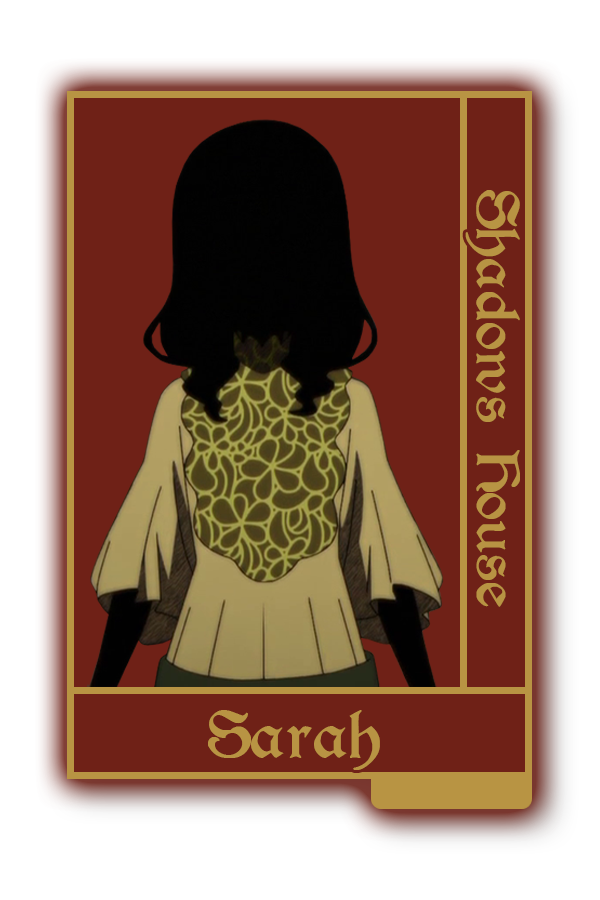
<style>
.page{position:relative;width:600px;height:900px;background:#6f2117}
.page>*{position:absolute;margin:0}
.t1{font:67.9px "Augusta-Regular";color:#b89443}
.t2{font:75px "Augusta-Regular";color:#b89443}
</style>
<div class="page">
<p class="t1" style="left:465px;top:190px;width:55px;height:417px;rotate:90deg">Shadows House</p>
<p class="t2" style="left:208px;top:710px;width:172px;height:60px">Sarah</p>
</div>
